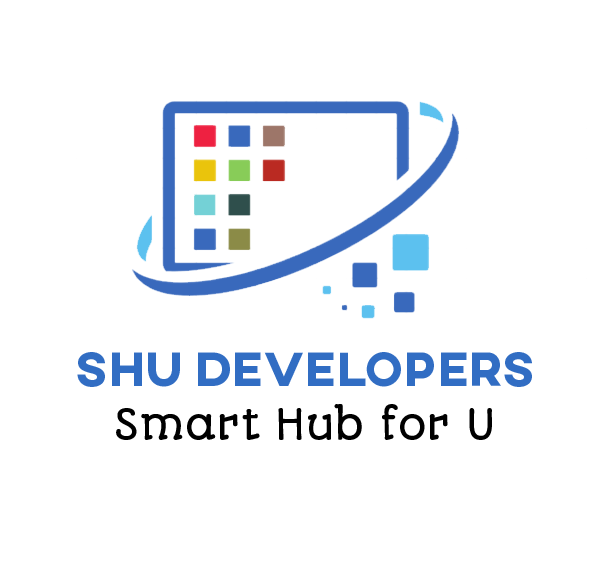
<style>
.page{position:relative;width:611px;height:576px;background:#ffffff}
.page>*{position:absolute;margin:0}
.t1{font:49px "AXIS-ExtraBold";color:#316dc3}
.t2{font:40px "AutourOne-Regular";color:#000000}
</style>
<div class="page">
<p class="t1" style="left:77px;top:352px;width:455px;height:35px">SHU DEVELOPERS</p>
<p class="t2" style="left:116px;top:404px;width:376px;height:36px">Smart Hub for U</p>
</div>
